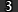
<style>
.page{position:relative;width:18px;height:12px;background:#333333}
.page>*{position:absolute;margin:0}
.t1{font:17px "Perpetua-Bold";color:#ffffff}
</style>
<div class="page">
<p class="t1" style="left:5px;top:1px;width:7px;height:10px">3</p>
</div>
